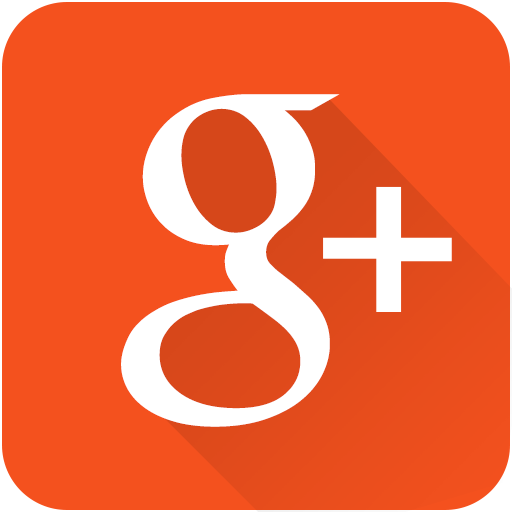
<style>
.page{position:relative;width:512px;height:512px;background:#f4511e}
.page>*{position:absolute;margin:0}
.t1{font:436.2px "Catull-Regular";letter-spacing:-0.04em;color:#ffffff}
</style>
<div class="page">
<p class="t1" style="left:121px;top:94px;width:219px;height:333px">g</p>
</div>
